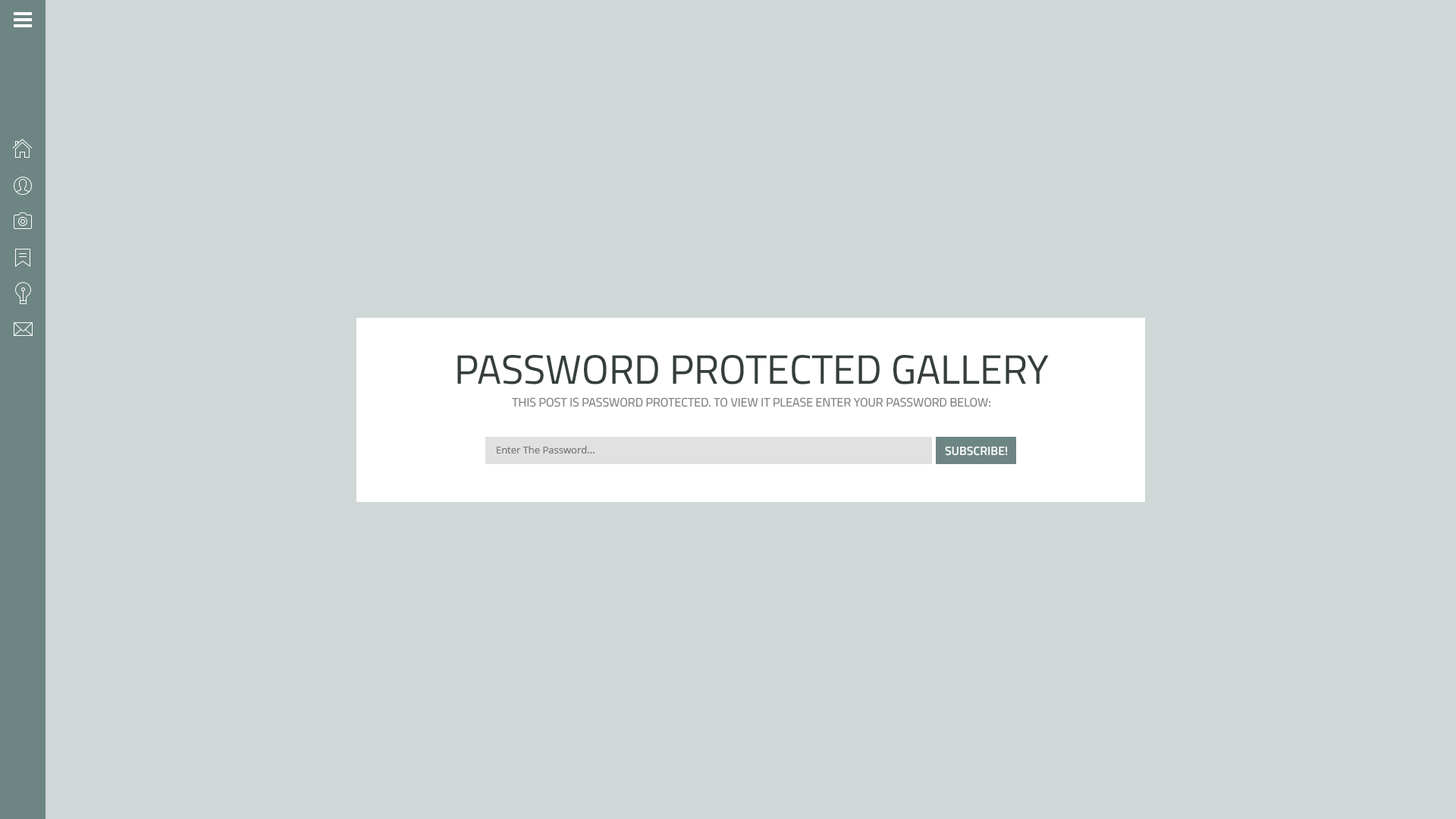
<style>
.page{position:relative;width:1456px;height:819px;background:#cfd7d7}
.page>*{position:absolute;margin:0}
.t1{font:40.9px "TitilliumWeb-Regular";color:#353e3d;text-transform:uppercase}
.t2{font:12.1px "TitilliumWeb-Regular";color:#808080;text-transform:uppercase}
.t3{font:9.9px "OpenSans";color:#777979}
.t4{font:12.1px "TitilliumWeb-SemiBold";color:#ffffff;text-transform:uppercase}
</style>
<div class="page">
<p class="t1" style="left:457px;top:355px;width:592px;height:29px">PASSWORD PROTECTED GALLERY</p>
<p class="t2" style="left:512px;top:397px;width:478px;height:10px">This post is password protected. To view it please enter your password below:</p>
<p class="t3" style="left:497px;top:446px;width:98px;height:7px">Enter The Password...</p>
<p class="t4" style="left:945px;top:446px;width:63px;height:10px">subscribe!</p>
</div>
